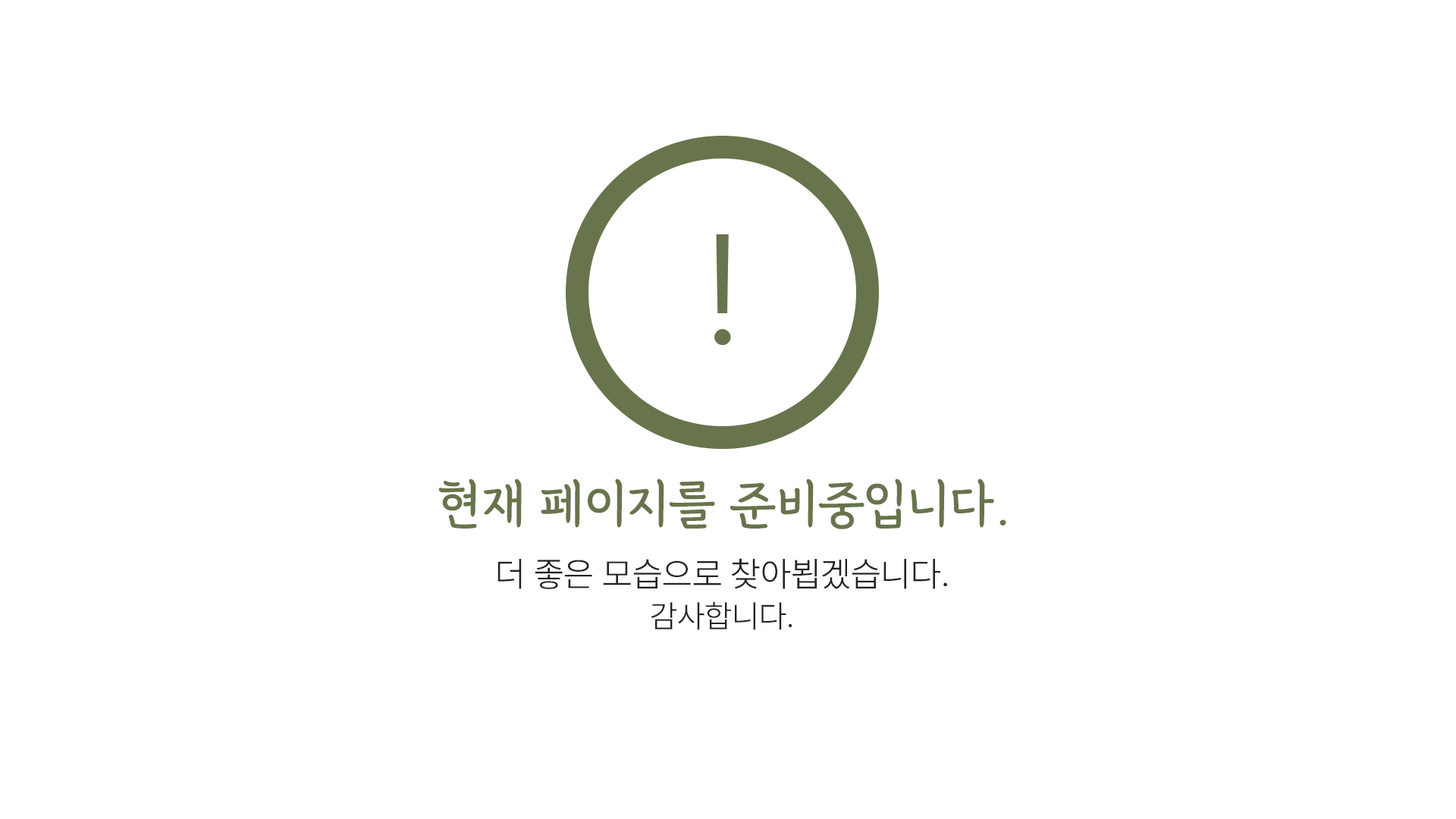
<style>
.page{position:relative;width:1456px;height:819px;background:#ffffff}
.page>*{position:absolute;margin:0}
.t1{font:56.9px "GangwonEduAllBold";color:#68744c}
.t2{font:34.8px/44.2px "Pretendard-Light";color:#232323}
.t3{font:31.6px/44.2px "Pretendard-Light";color:#232323}
</style>
<div class="page">
<p class="t1" style="left:438px;top:479px;width:568px;height:50px">현재 페이지를 준비중입니다.</p>
<p class="t2" style="left:497px;top:558px;width:450px;height:72px;text-align:center">더 좋은 모습으로 찾아뵙겠습니다.<br><span class="t3">감사합니다.</span></p>
</div>
